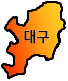
<style>
.page{position:relative;width:68px;height:81px;background:#ffffff}
.page>*{position:absolute;margin:0}
.t1{font:14px "HancomGothicBold";color:#000000}
</style>
<div class="page">
<p class="t1" style="left:24px;top:30px;width:26px;height:13px">대구</p>
</div>
